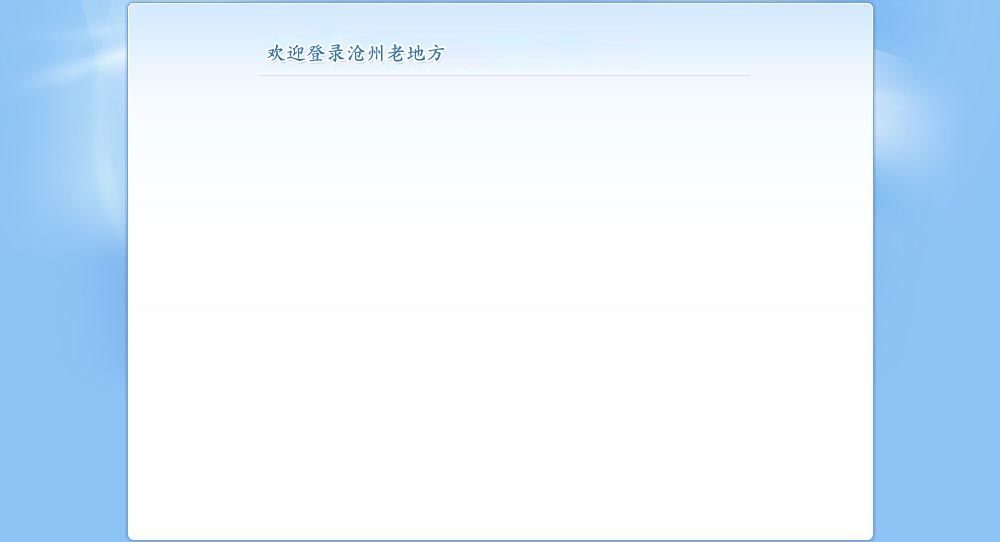
<style>
.page{position:relative;width:1000px;height:542px;background:#ffffff}
.page>*{position:absolute;margin:0}
.t1{font:20px "DFKaiW5-A";color:#236aa8}
</style>
<div class="page">
<p class="t1" style="left:267px;top:44px;width:178px;height:18px">欢迎登录沧州老地方</p>
</div>
